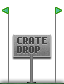
<style>
.page{position:relative;width:64px;height:84px;background:#ffffff}
.page>*{position:absolute;margin:0}
.t1{font:8px/9px "Snakebold";color:#434343}
</style>
<div class="page">
<p class="t1" style="left:17px;top:37px;width:30px;height:16px">CRATE<br>DROP</p>
</div>
